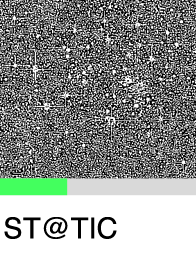
<style>
.page{position:relative;width:196px;height:264px;background:#ffffff}
.page>*{position:absolute;margin:0}
.t1{font:28.9px "Helvetica";color:#000000}
</style>
<div class="page">
<p class="t1" style="left:4px;top:217px;width:113px;height:22px">ST@TIC</p>
</div>
